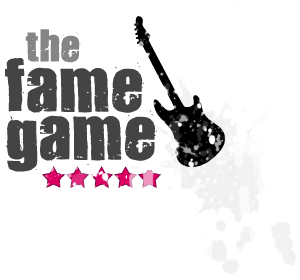
<style>
.page{position:relative;width:300px;height:280px;background:#ffffff}
.page>*{position:absolute;margin:0}
.t1{font:110px "RockStar20";color:#000000}
.t2{font:36px "321impact";color:#858585}
.t3{font:60px/36px "321impact";color:#444444}
.t4{font:60px/48px "321impact";color:#444444}
</style>
<div class="page">
<p class="t1" style="left:134px;top:16px;width:91px;height:151px;rotate:-101deg">y</p>
<p class="t2" style="left:25px;top:29px;width:56px;height:34px">the</p>
<p class="t3" style="left:5px;top:58px;width:152px;height:114px">fame <span class="t4">game</span></p>
</div>
